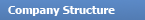
<style>
.page{position:relative;width:145px;height:20px}
.page>*{position:absolute;margin:0}
.t1{font:11px "Tahoma-Bold";color:#ffffff}
</style>
<div class="page">
<p class="t1" style="left:8px;top:6px;width:107px;height:10px">Company Structure</p>
</div>
